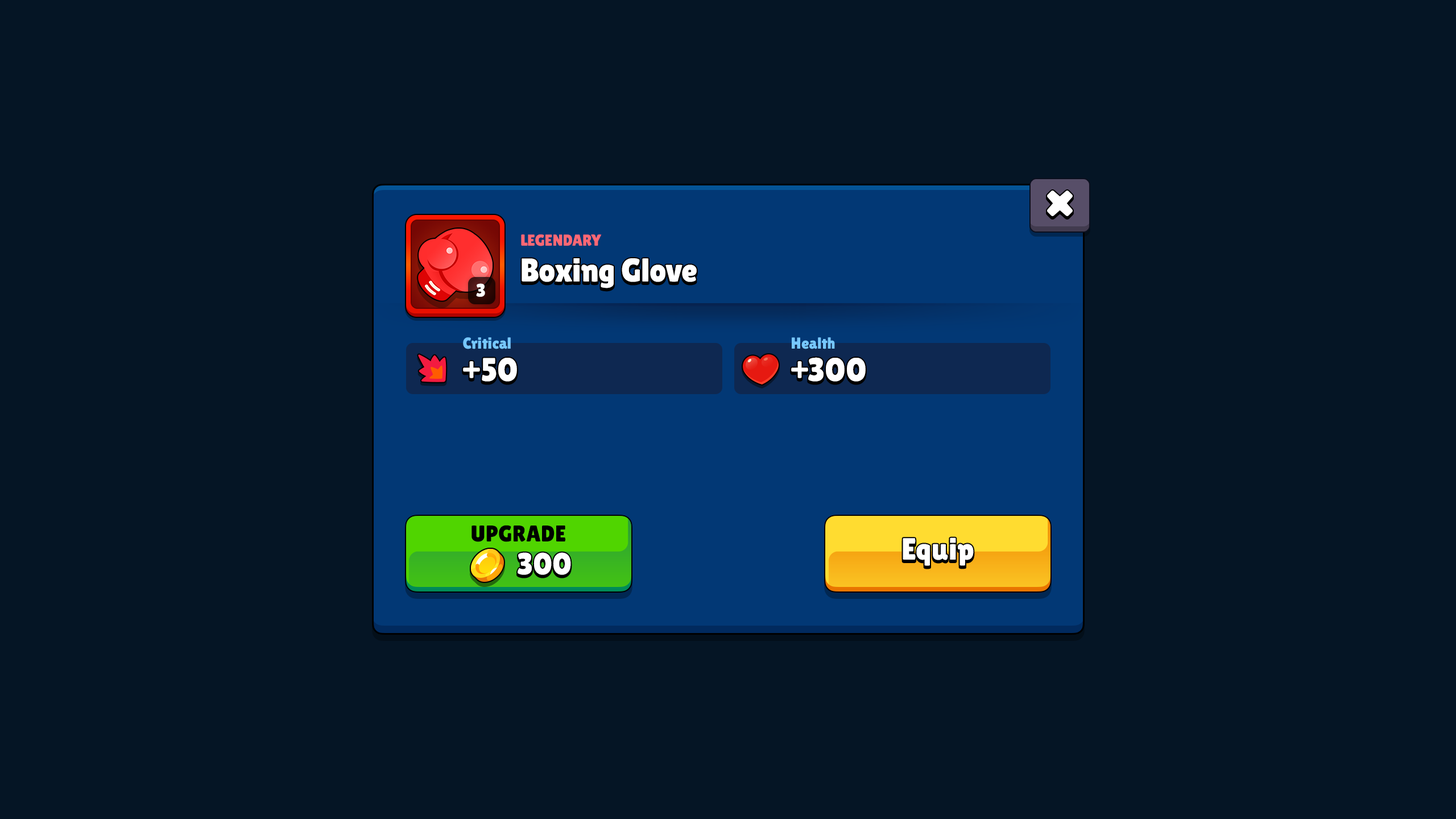
<style>
.page{position:relative;width:1456px;height:819px;background:#051525}
.page>*{position:absolute;margin:0}
.t1{font:15.9px "LilitaOne";color:#ff6874;text-transform:uppercase}
.t2{font:33px "LilitaOne";color:#ffffff}
.t3{font:18.2px "LilitaOne";color:#ffffff}
.t4{font:15.9px "LilitaOne";letter-spacing:0.02em;color:#76c7ff}
.t5{font:33px "LilitaOne";letter-spacing:0.02em;color:#ffffff}
.t6{font:22.7px "LilitaOne";letter-spacing:0.02em;color:#000000;text-transform:uppercase}
.t7{font:30.7px "LilitaOne";letter-spacing:0.02em;color:#ffffff}
</style>
<div class="page">
<p class="t1" style="left:521px;top:234px;width:81px;height:12px">Legendary</p>
<p class="t2" style="left:522px;top:258px;width:175px;height:30px">Boxing Glove</p>
<p class="t3" style="left:476px;top:283px;width:9px;height:14px">3</p>
<p class="t4" style="left:463px;top:337px;width:48px;height:12px">Critical</p>
<p class="t4" style="left:792px;top:337px;width:43px;height:12px">Health</p>
<p class="t5" style="left:463px;top:358px;width:54px;height:24px">+50</p>
<p class="t5" style="left:791px;top:357px;width:75px;height:25px">+300</p>
<p class="t6" style="left:471px;top:525px;width:94px;height:17px">Upgrade</p>
<p class="t7" style="left:903px;top:537px;width:71px;height:29px">Equip</p>
<p class="t7" style="left:518px;top:552px;width:53px;height:23px">300</p>
</div>
